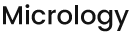
<style>
.page{position:relative;width:130px;height:32px;background:#ffffff}
.page>*{position:absolute;margin:0}
.t1{font:26px "Poppins-Medium";color:#131313}
</style>
<div class="page">
<p class="t1" style="left:3px;top:4px;width:126px;height:28px">Micrology</p>
</div>
